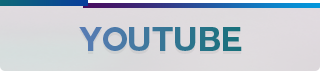
<style>
.page{position:relative;width:320px;height:71px}
.page>*{position:absolute;margin:0}
.t1{font:33px "Couture-Bold";font-variant:small-caps}
</style>
<div class="page">
<p class="t1" style="left:79px;top:27px;width:163px;height:24px">YOUTUBE</p>
</div>
